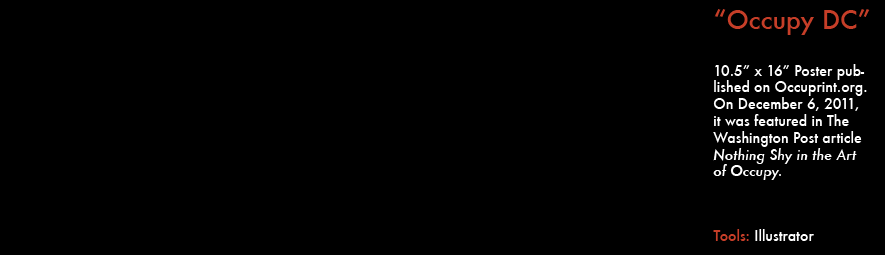
<style>
.page{position:relative;width:885px;height:255px;background:#000000}
.page>*{position:absolute;margin:0}
.t1{font:25px "Futura-Medium";color:#c63e28}
.t2{font:14px "Futura-Medium";color:#ffffff}
.t3{font:14px "Futura-MediumItalic";color:#ffffff}
.t4{font:14px "Futura-Medium";color:#c63e28}
</style>
<div class="page">
<p class="t1" style="left:714px;top:9px;width:156px;height:26px">“Occupy DC”</p>
<p class="t2" style="left:713px;top:64px;width:154px;height:116px">10.5” x 16” Poster published on Occuprint.org. On December 6, 2011, it was featured in The Washington Post article <span class="t3">Nothing Shy in the Art of Occupy.<br><br><br><br>t</span></p>
<p class="t2" style="left:713px;top:229px;width:101px;height:12px"><span class="t4">Tools: </span>Illustrator</p>
</div>
